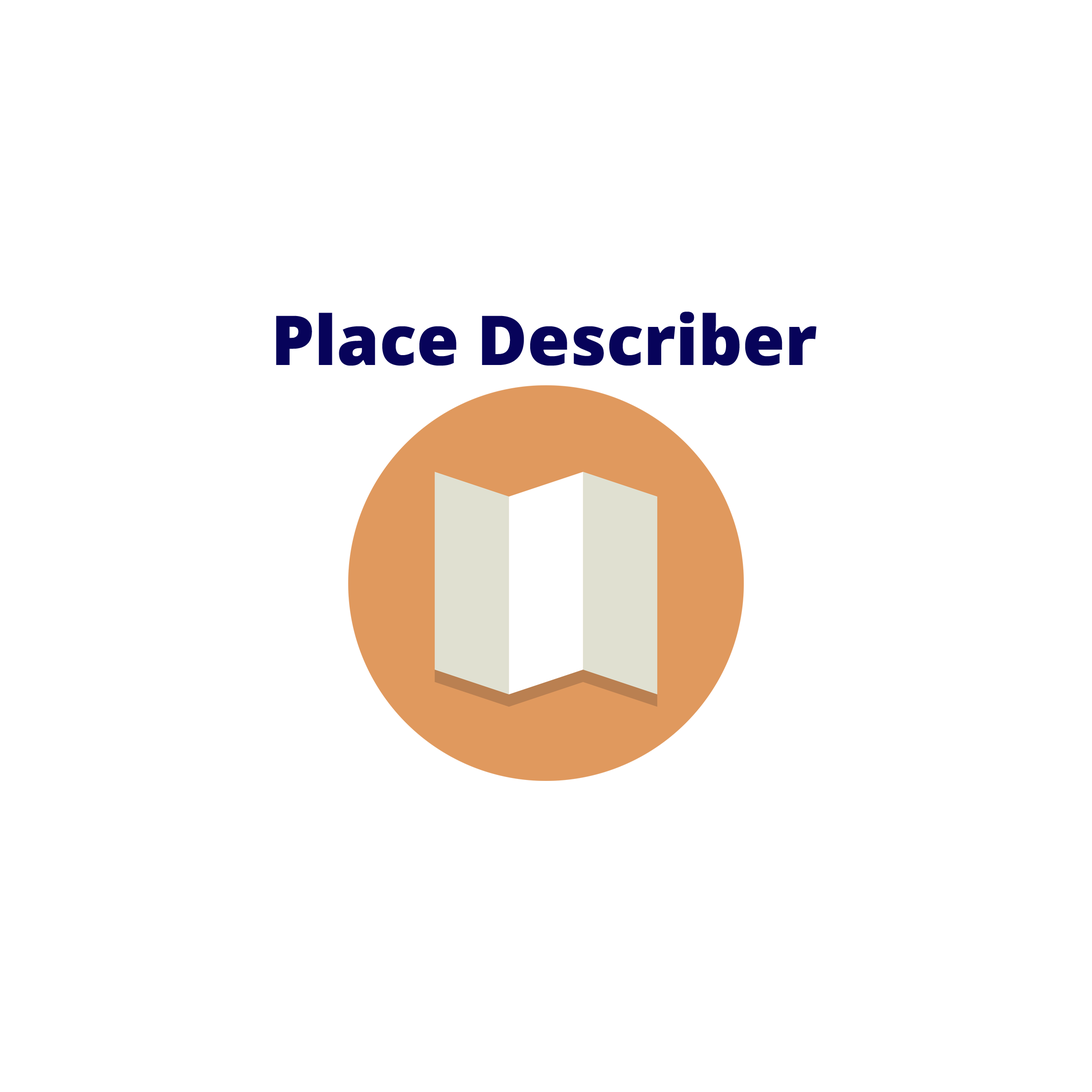
<style>
.page{position:relative;width:1092px;height:1092px;background:#ffffff}
.page>*{position:absolute;margin:0}
.t1{font:68.7px "OpenSans-Extrabold";color:#07035a}
</style>
<div class="page">
<p class="t1" style="left:276px;top:312px;width:541px;height:54px">Place Describer</p>
</div>
